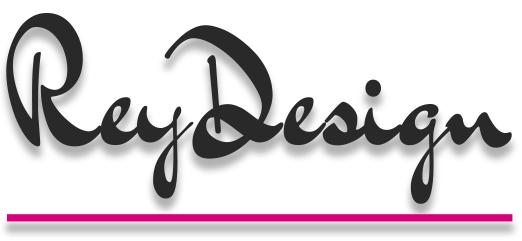
<style>
.page{position:relative;width:522px;height:241px;background:#ffffff}
.page>*{position:absolute;margin:0}
.t1{font:144px "DrSugiyama-Regular";color:#2a2929}
</style>
<div class="page">
<p class="t1" style="left:6px;top:13px;width:506px;height:191px">ReyDesign</p>
</div>
